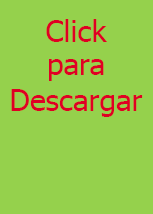
<style>
.page{position:relative;width:153px;height:214px;background:#95d14c}
.page>*{position:absolute;margin:0}
.t1{font:30px "Tahoma";color:#df0024}
</style>
<div class="page">
<p class="t1" style="left:46px;top:19px;width:61px;height:23px">Click</p>
<p class="t1" style="left:49px;top:59px;width:55px;height:22px">para</p>
<p class="t1" style="left:11px;top:89px;width:132px;height:28px">Descargar</p>
</div>
